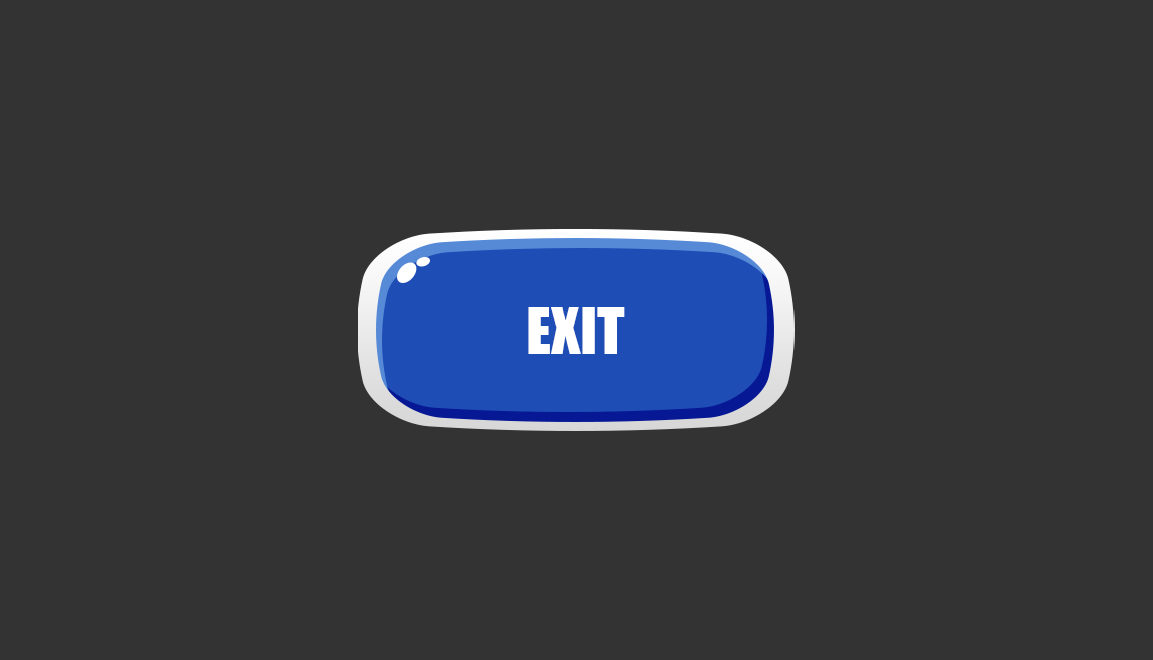
<style>
.page{position:relative;width:1153px;height:660px;background:#333333}
.page>*{position:absolute;margin:0}
.t1{font:60px "Impact";color:#ffffff}
</style>
<div class="page">
<p class="t1" style="left:528px;top:307px;width:97px;height:47px">EXIT</p>
</div>
